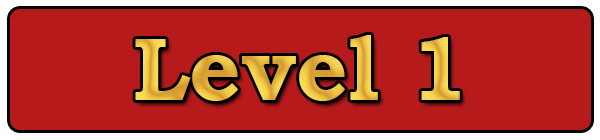
<style>
.page{position:relative;width:600px;height:140px;background:#b61a1a}
.page>*{position:absolute;margin:0}
.t1{font:90px "BookmanOldStyle-Bold"}
</style>
<div class="page">
<p class="t1" style="left:135px;top:35px;width:325px;height:66px">Level 1</p>
</div>
